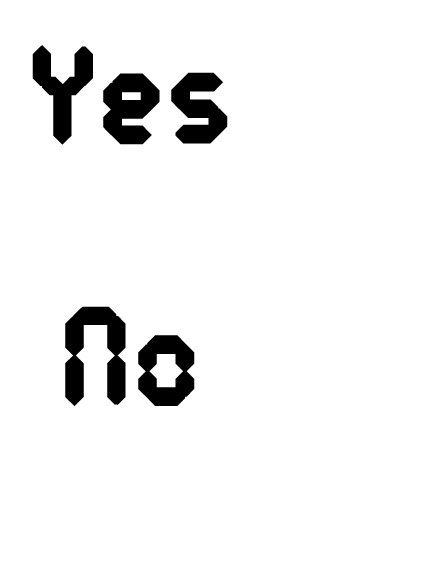
<style>
.page{position:relative;width:425px;height:567px;background:#ffffff}
.page>*{position:absolute;margin:0}
.t1{font:150px "PocketCalculator";color:#000000;font-weight:bold}
</style>
<div class="page">
<p class="t1" style="left:32px;top:45px;width:196px;height:361px;text-align:center">Yes<br>No</p>
</div>
